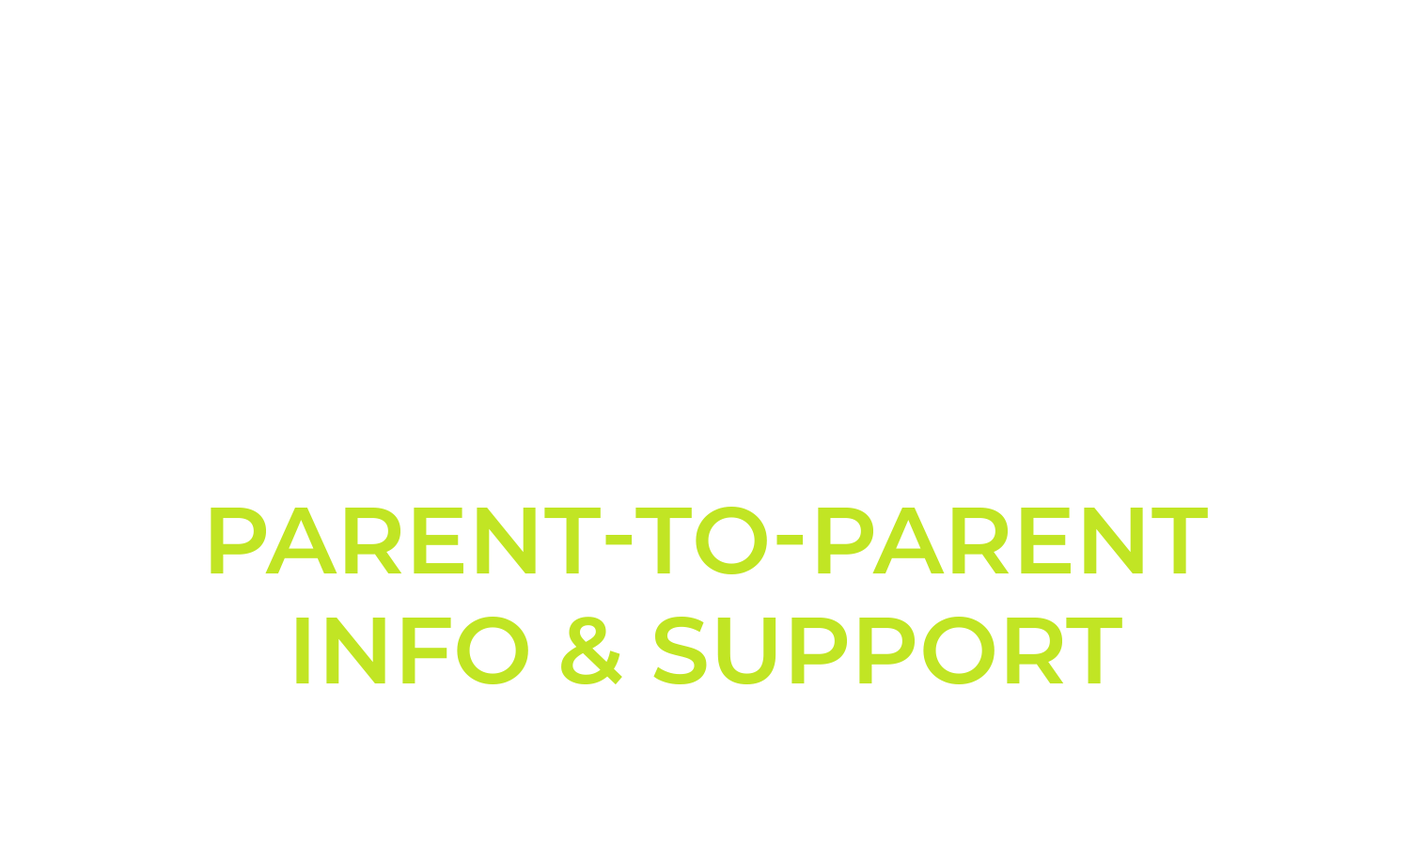
<style>
.page{position:relative;width:1410px;height:846px;background:#ffffff}
.page>*{position:absolute;margin:0}
.t1{font:94px/0.2px "Montserrat-SemiBold";color:#c1e524;text-transform:uppercase}
</style>
<div class="page">
<p class="t1" style="left:211px;top:507px;width:997px;height:178px;text-align:center">parent-to-parent<br>info &amp; support</p>
</div>
